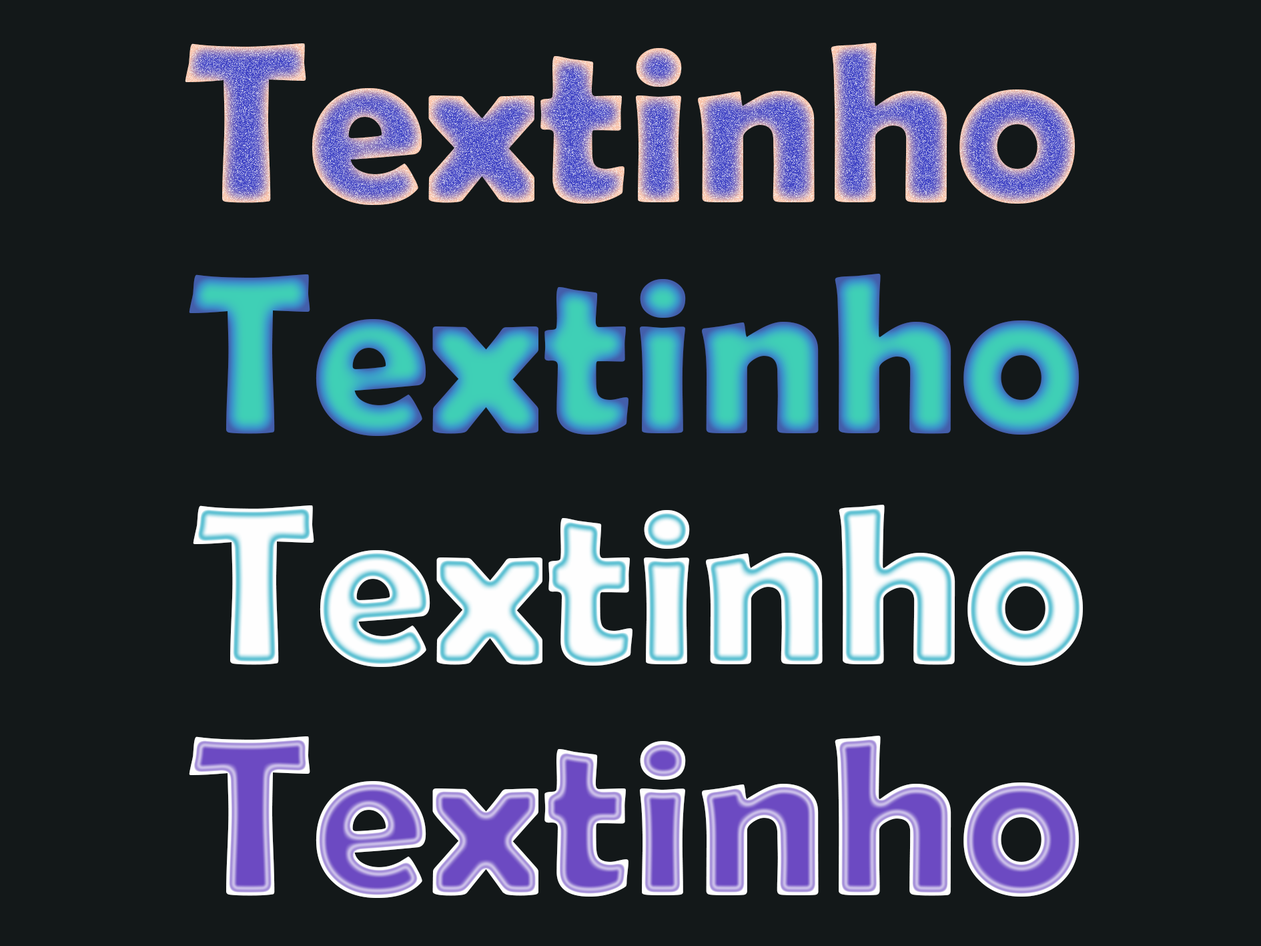
<style>
.page{position:relative;width:1261px;height:946px;background:#131819}
.page>*{position:absolute;margin:0}
.t1{font:228.9px "BerlinSansFBDemi-Bold"}
.t2{font:228.9px "BerlinSansFBDemi-Bold";color:#fefefe}
</style>
<div class="page">
<p class="t1" style="left:185px;top:43px;width:890px;height:162px">Textinho</p>
<p class="t1" style="left:189px;top:274px;width:890px;height:162px">Textinho</p>
<p class="t2" style="left:193px;top:504px;width:890px;height:163px">Textinho</p>
<p class="t1" style="left:189px;top:735px;width:890px;height:162px">Textinho</p>
</div>
